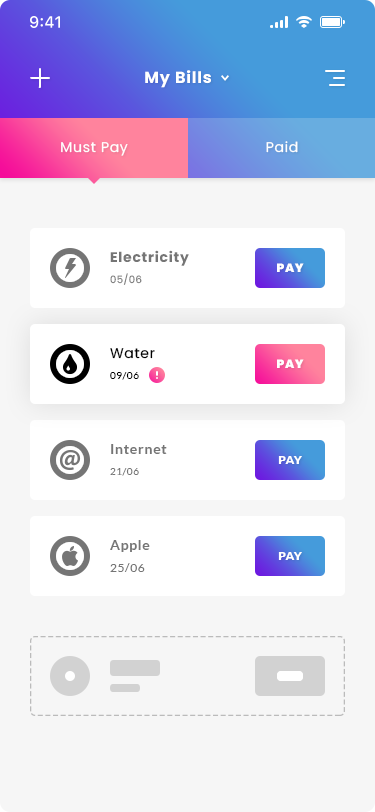
<style>
.page{position:relative;width:375px;height:812px;background:#f6f6f6}
.page>*{position:absolute;margin:0}
.t1{font:16px "Poppins-Bold";letter-spacing:0.05em;color:#ffffff}
.t2{font:14px "Poppins-Regular";letter-spacing:0.05em;color:#ffffff}
.t3{font:14px "Poppins-Bold";letter-spacing:0.05em;color:#757575}
.t4{font:12px "Poppins-Black";letter-spacing:0.05em;color:#ffffff}
.t5{font:10px "Poppins-Regular";letter-spacing:0.05em;color:#757575}
.t6{font:14px "Poppins-Regular";letter-spacing:0.05em;color:#000000}
.t7{font:10px "Lato-Regular";letter-spacing:0.05em;color:#000000}
.t8{font:14px "Lato-Bold";letter-spacing:0.05em;color:#757575}
.t9{font:12px "Lato-Black";letter-spacing:0.05em;color:#ffffff}
.t10{font:10px "Lato-Regular";letter-spacing:0.05em;color:#757575}
.t11{font:12px "Lato-Regular";letter-spacing:0.05em;color:#757575}
</style>
<div class="page">
<p class="t1" style="left:145px;top:70px;width:66px;height:18px">My Bills</p>
<p class="t2" style="left:61px;top:142px;width:67px;height:14px">Must Pay</p>
<p class="t2" style="left:266px;top:141px;width:32px;height:12px">Paid</p>
<p class="t3" style="left:110px;top:250px;width:79px;height:16px">Electricity</p>
<p class="t4" style="left:277px;top:263px;width:27px;height:9px">PAY</p>
<p class="t5" style="left:110px;top:273px;width:32px;height:12px">05/06</p>
<p class="t6" style="left:110px;top:348px;width:45px;height:11px">Water</p>
<p class="t4" style="left:277px;top:359px;width:27px;height:9px">PAY</p>
<p class="t7" style="left:110px;top:372px;width:29px;height:8px">09/06</p>
<p class="t8" style="left:111px;top:444px;width:56px;height:10px">Internet</p>
<p class="t9" style="left:278px;top:456px;width:24px;height:8px">PAY</p>
<p class="t10" style="left:110px;top:468px;width:29px;height:8px">21/06</p>
<p class="t8" style="left:110px;top:540px;width:40px;height:12px">Apple</p>
<p class="t9" style="left:278px;top:552px;width:24px;height:8px">PAY</p>
<p class="t11" style="left:110px;top:563px;width:35px;height:9px">25/06</p>
</div>
